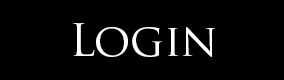
<style>
.page{position:relative;width:284px;height:80px;background:#000000}
.page>*{position:absolute;margin:0}
.t1{font:44.6px "TrajanPro-Regular";color:#ffffff}
</style>
<div class="page">
<p class="t1" style="left:73px;top:23px;width:142px;height:34px">Login</p>
</div>
